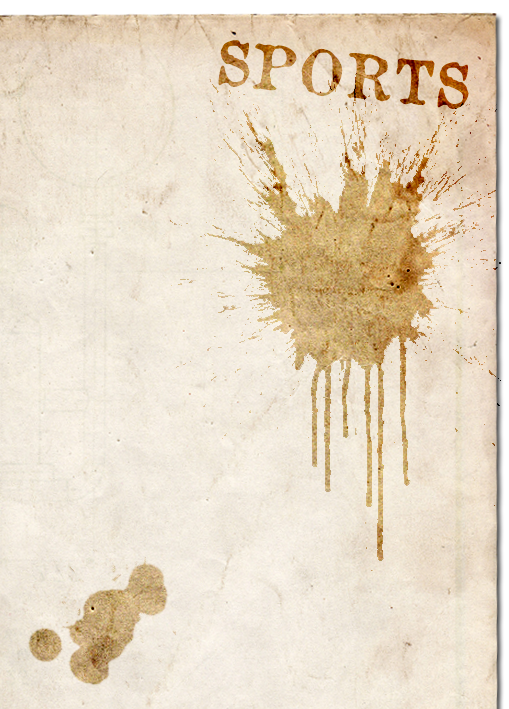
<style>
.page{position:relative;width:509px;height:709px}
.page>*{position:absolute;margin:0}
.t1{font:60px "OldNewspaperTypes"}
</style>
<div class="page">
<p class="t1" style="left:218px;top:40px;width:251px;height:69px;rotate:6deg">SPORTS</p>
<p class="t1" style="left:218px;top:40px;width:251px;height:69px;rotate:6deg">SPORTS</p>
</div>
